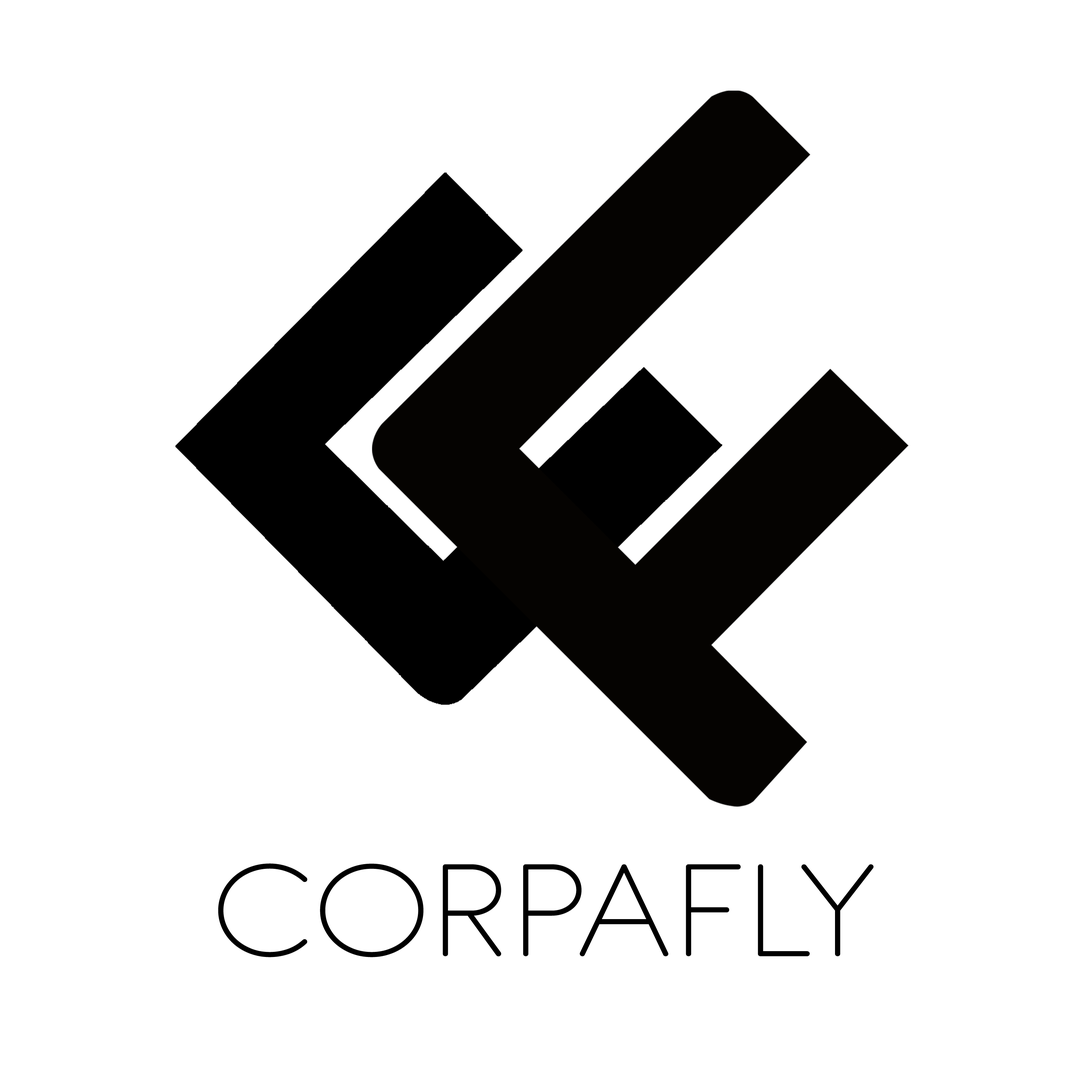
<style>
.page{position:relative;width:1092px;height:1092px;background:#ffffff}
.page>*{position:absolute;margin:0}
.t1{font:137.4px "AntipastoPro-Hairline";letter-spacing:0.04em;color:#000000;font-weight:bold;scale:1.11 1}
</style>
<div class="page">
<p class="t1" style="left:218px;top:863px;width:656px;height:94px">CORPAFLY</p>
</div>
